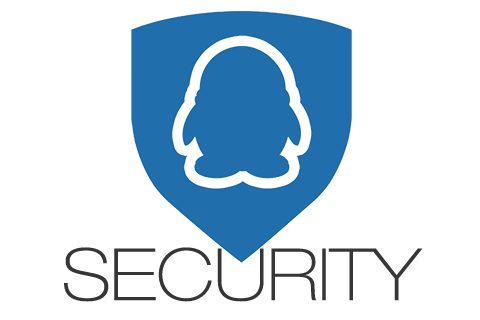
<style>
.page{position:relative;width:480px;height:320px;background:#ffffff}
.page>*{position:absolute;margin:0}
.t1{font:72px "HelveticaNeueLTPro-ThEx";color:#363636}
</style>
<div class="page">
<p class="t1" style="left:64px;top:247px;width:359px;height:55px">SECURITY</p>
</div>
